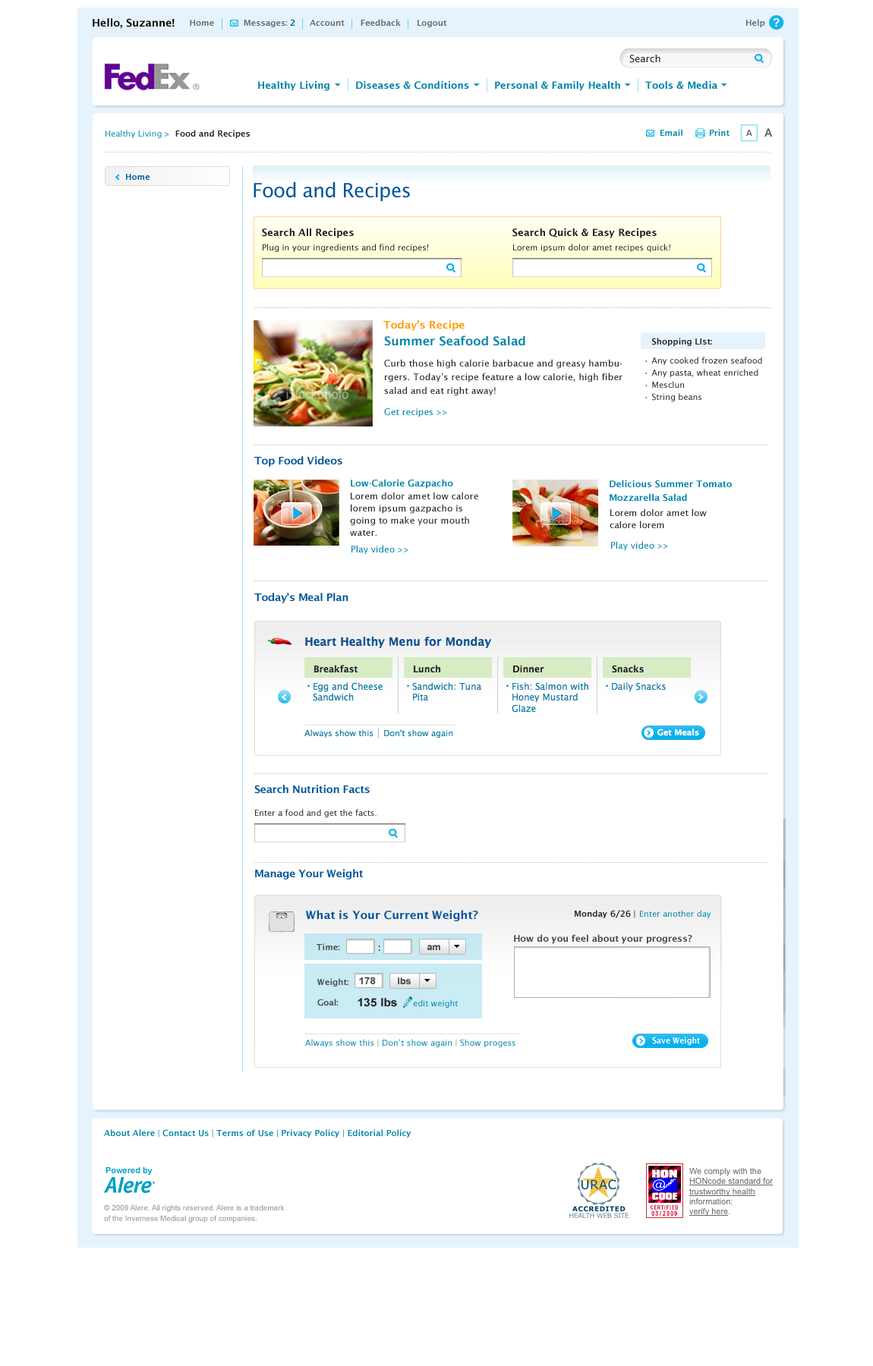
<style>
.page{position:relative;width:873px;height:1366px;background:#ffffff}
.page>*{position:absolute;margin:0}
.t1{font:10.6px "LucidaSans-Demi";color:#000000}
.t2{font:8.3px "LucidaSans-Demi";color:#666666}
.t3{font:8.3px "LucidaSans-Demi";color:#005499}
.t4{font:11.4px "Arial-BoldMT";color:#ffffff}
.t5{font:9.9px "LucidaSans";color:#222222}
.t6{font:9.9px "LucidaSans-Demi";color:#0084a9}
.t7{font:8.3px "LucidaSans";color:#0084a9}
.t8{font:8.3px "LucidaSans-Demi";color:#222222}
.t9{font:8.3px "LucidaSans-Demi";color:#0084a9}
.t10{font:8.3px "Arial-BoldMT";color:#666666}
.t11{font:11.4px "Arial-BoldMT";color:#666666}
.t12{font:19.7px "LucidaSansStd";letter-spacing:-0.03em;color:#005499}
.t13{font:9.9px "LucidaSans-Demi";color:#222222}
.t14{font:8.3px "LucidaSans";color:#222222}
.t15{font:10.6px "LucidaSans-Demi";color:#ff9900}
.t16{font:12.1px "LucidaSans-Demi";color:#0085a9}
.t17{font:8.3px/12.1px "LucidaSans";color:#222222}
.t18{font:8.3px/12.1px "LucidaSans-Demi";color:#222222}
.t19{font:8.3px/19px "LucidaSans";color:#222222}
.t20{font:9.1px/13.7px "LucidaSans";color:#222222}
.t21{font:9.1px "LucidaSans";color:#0084a9}
.t22{font:10.6px "LucidaSans-Demi";letter-spacing:-0.02em;color:#005499}
.t23{font:9.1px "LucidaSans-Demi";color:#0084a9}
.t24{font:9.1px/13.7px "LucidaSans-Demi";color:#0084a9}
.t25{font:9.1px/12.1px "LucidaSans";color:#222222}
.t26{font:8.3px "Arial-BoldMT";color:#00a0c6}
.t27{font:7.6px/10.9px "ArialMT";color:#999999}
</style>
<div class="page">
<p class="t1" style="left:93px;top:18px;width:82px;height:11px">Hello, Suzanne!</p>
<p class="t2" style="left:190px;top:19px;width:104px;height:8px">Home           Messages: <span class="t3">2</span></p>
<p class="t2" style="left:310px;top:19px;width:137px;height:8px">Account      Feedback      Logout</p>
<p class="t2" style="left:746px;top:19px;width:19px;height:8px">Help</p>
<p class="t4" style="left:773px;top:18px;width:6px;height:9px">?</p>
<p class="t5" style="left:629px;top:55px;width:31px;height:8px">Search</p>
<p class="t6" style="left:258px;top:80px;width:71px;height:11px">Healthy Living</p>
<p class="t6" style="left:356px;top:80px;width:113px;height:10px">Diseases &amp; Conditions</p>
<p class="t6" style="left:495px;top:80px;width:125px;height:11px">Personal &amp; Family Health</p>
<p class="t6" style="left:645px;top:80px;width:72px;height:9px">Tools &amp; Media</p>
<p class="t7" style="left:105px;top:130px;width:145px;height:8px">Healthy Living &gt;  <span class="t8">Food and Recipes</span></p>
<p class="t9" style="left:660px;top:129px;width:22px;height:7px">Email</p>
<p class="t9" style="left:710px;top:129px;width:19px;height:7px">Print</p>
<p class="t10" style="left:746px;top:130px;width:6px;height:6px">A</p>
<p class="t11" style="left:764px;top:128px;width:9px;height:9px">A</p>
<p class="t3" style="left:126px;top:174px;width:24px;height:6px">Home</p>
<p class="t12" style="left:254px;top:182px;width:156px;height:19px">Food and Recipes</p>
<p class="t13" style="left:262px;top:228px;width:92px;height:10px">Search All Recipes</p>
<p class="t13" style="left:512px;top:228px;width:145px;height:10px">Search Quick &amp; Easy Recipes</p>
<p class="t14" style="left:263px;top:244px;width:165px;height:8px">Plug in your ingredients and find recipes!</p>
<p class="t14" style="left:513px;top:244px;width:157px;height:8px">Lorem ipsum dolor amet recipes quick!</p>
<p class="t15" style="left:383px;top:320px;width:81px;height:11px">Today’s Recipe</p>
<p class="t16" style="left:384px;top:335px;width:141px;height:11px">Summer Seafood Salad</p>
<p class="t17" style="left:645px;top:338px;width:117px;height:64px"><span class="t18">   Shopping LIst:<br></span><span class="t19">• Any cooked frozen seafood<br></span>• Any pasta, wheat enriched<br>• Mesclun<br>• String beans</p>
<p class="t20" style="left:384px;top:359px;width:238px;height:37px">Curb those high calorie barbacue and greasy hambu-rgers. Today’s recipe feature a low calorie, high fiber salad and eat right away!</p>
<p class="t21" style="left:384px;top:408px;width:63px;height:9px">Get recipes &gt;&gt;</p>
<p class="t22" style="left:254px;top:456px;width:88px;height:11px">Top Food Videos</p>
<p class="t23" style="left:351px;top:479px;width:102px;height:10px">Low-Calorie Gazpacho</p>
<p class="t24" style="left:609px;top:480px;width:123px;height:22px">Delicious Summer Tomato<br>Mozzarella Salad</p>
<p class="t25" style="left:350px;top:492px;width:128px;height:44px">Lorem dolor amet low calore lorem ipsum gazpacho is going to make your mouth water.</p>
<p class="t25" style="left:609px;top:509px;width:98px;height:19px">Lorem dolor amet low <br>calore lorem</p>
<p class="t21" style="left:351px;top:545px;width:57px;height:10px">Play video &gt;&gt;</p>
<p class="t21" style="left:611px;top:541px;width:57px;height:10px">Play video &gt;&gt;</p>
<p class="t22" style="left:254px;top:593px;width:94px;height:10px">Today’s Meal Plan</p>
<p class="t22" style="left:254px;top:785px;width:116px;height:9px">Search Nutrition Facts</p>
<p class="t14" style="left:255px;top:809px;width:121px;height:8px">Enter a food and get the facts.</p>
<p class="t22" style="left:255px;top:869px;width:108px;height:11px">Manage Your Weight</p>
<p class="t9" style="left:104px;top:1129px;width:307px;height:9px">About Alere <span class="t7">| </span>Contact Us <span class="t7">| </span>Terms of Use <span class="t7">| </span>Privacy Policy <span class="t7">| </span>Editorial Policy</p>
<p class="t26" style="left:105px;top:1167px;width:48px;height:9px">Powered by</p>
<p class="t27" style="left:104px;top:1205px;width:181px;height:18px">© 2009 Alere. All rights reserved. Alere is a trademark <br>of the Inverness Medical group of companies.</p>
</div>
